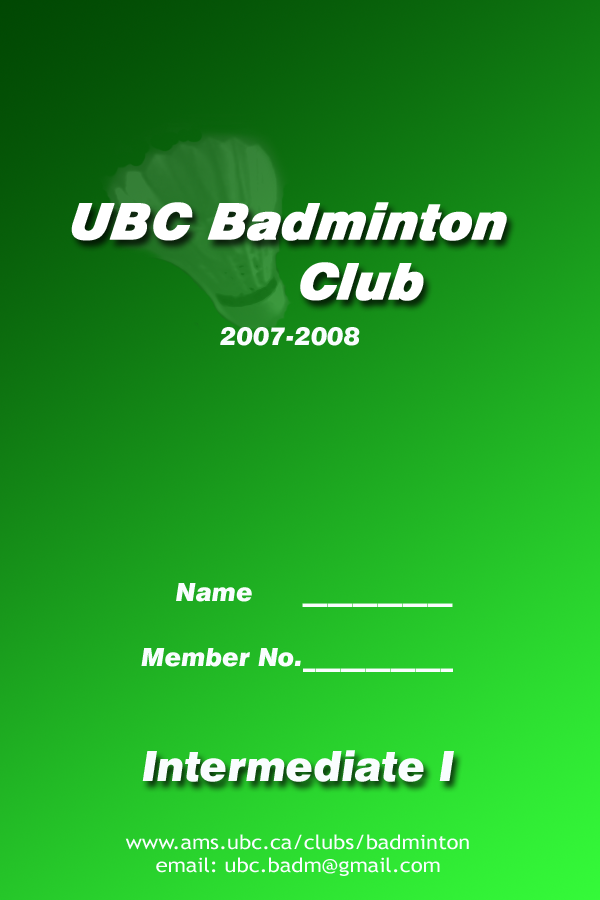
<style>
.page{position:relative;width:600px;height:900px}
.page>*{position:absolute;margin:0}
.t1{font:25px "Swiss721BT-BlackItalic";color:#f9fdfe}
.t2{font:41.7px "Swiss721BT-BlackItalic";color:#f9fdfe}
.t3{font:19.8px "TrebuchetMS";color:#f9fdfe;scale:1.1 1}
</style>
<div class="page">
<p class="t1" style="left:220px;top:327px;width:140px;height:19px">2007-2008</p>
<p class="t1" style="left:176px;top:583px;width:277px;height:24px">Name      ____________</p>
<p class="t1" style="left:141px;top:648px;width:312px;height:24px">Member No.____________</p>
<p class="t2" style="left:142px;top:750px;width:312px;height:32px">Intermediate I</p>
<p class="t3" style="left:125px;top:834px;width:344px;height:42px;text-align:center">www.ams.ubc.ca/clubs/badminton<br>email: ubc.badm@gmail.com</p>
</div>
